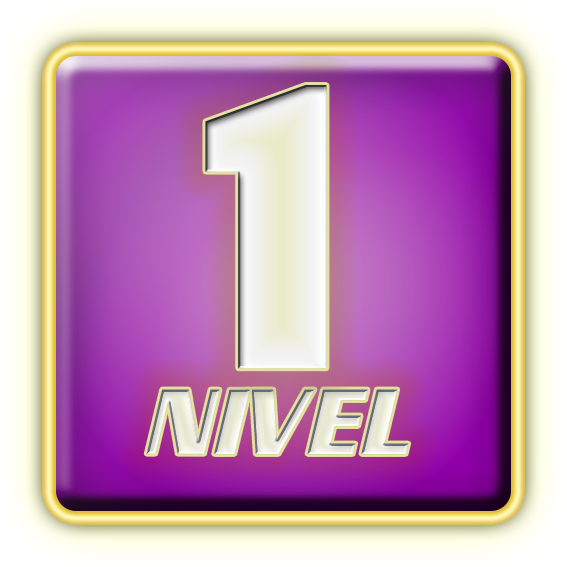
<style>
.page{position:relative;width:567px;height:567px}
.page>*{position:absolute;margin:0}
.t1{font:405px "EnterSansmanBold";letter-spacing:0.01em;color:#eff0e6;scale:0.9 1}
.t2{font:92px "EnterSansmanBoldItalic";letter-spacing:0.01em;scale:0.9 1}
</style>
<div class="page">
<p class="t1" style="left:205px;top:85px;width:122px;height:284px">1</p>
<p class="t2" style="left:146px;top:389px;width:263px;height:65px">NIVEL</p>
</div>
